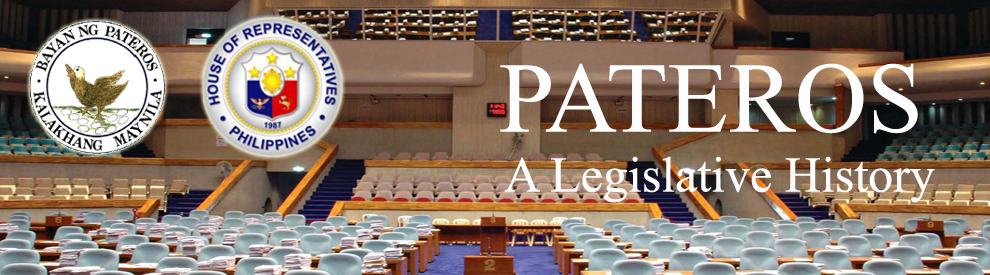
<style>
.page{position:relative;width:990px;height:275px}
.page>*{position:absolute;margin:0}
.t1{font:50px "TimesNewRomanPSMT";color:#fdfcfc}
.t2{font:100px "TimesNewRomanPSMT";color:#fdfdfd}
</style>
<div class="page">
<p class="t1" style="left:500px;top:63px;width:435px;height:140px;text-align:center"><span class="t2">PATEROS<br></span>A Legislative History</p>
</div>
